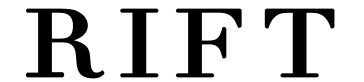
<style>
.page{position:relative;width:364px;height:82px;background:#ffffff}
.page>*{position:absolute;margin:0}
.t1{font:91.7px "Didot";letter-spacing:0.1em;color:#000000;font-weight:bold;scale:1.2 1}
</style>
<div class="page">
<p class="t1" style="left:25px;top:8px;width:310px;height:71px">RIFT</p>
</div>
